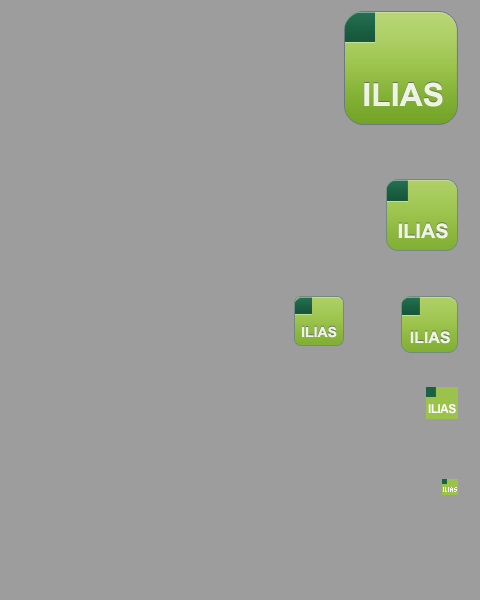
<style>
.page{position:relative;width:480px;height:600px;background:#9d9d9d}
.page>*{position:absolute;margin:0}
.t1{font:32px "Arial-BoldMT";color:#ecf3e1}
.t2{font:20px "Arial-BoldMT";color:#eef4e2}
.t3{font:14px "Arial-BoldMT";color:#eef4e2}
.t4{font:16px "Arial-BoldMT";color:#eef4e2}
.t5{font:12px "Arial-BoldMT";letter-spacing:-0.05em;color:#ffffff}
</style>
<div class="page">
<p class="t1" style="left:364px;top:81px;width:79px;height:25px">ILIAS</p>
<p class="t2" style="left:398px;top:222px;width:50px;height:16px">ILIAS</p>
<p class="t3" style="left:302px;top:325px;width:35px;height:12px">ILIAS</p>
<p class="t4" style="left:410px;top:330px;width:40px;height:13px">ILIAS</p>
<p class="t5" style="left:428px;top:404px;width:28px;height:10px">ILIAS</p>
</div>
